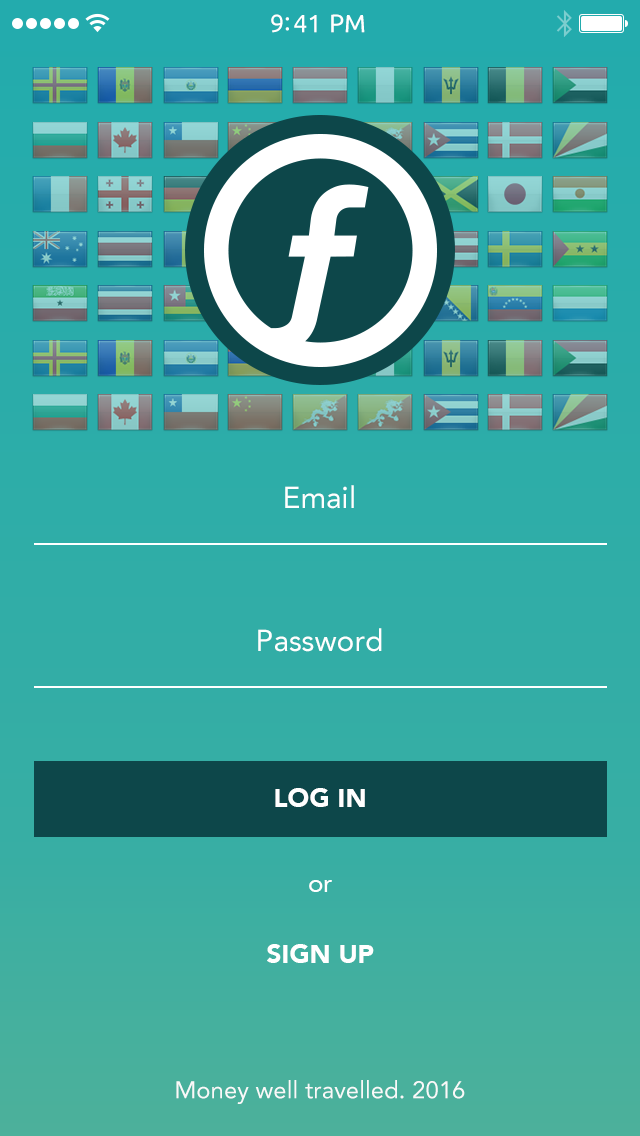
<style>
.page{position:relative;width:640px;height:1136px}
.page>*{position:absolute;margin:0}
.t1{font:25px "Ubuntu";color:#ffffff}
.t2{font:30px "Avenir-Roman";color:#ffffff}
.t3{font:26px "Avenir-Black";color:#ffffff;text-transform:uppercase}
.t4{font:26px "Avenir-Roman";color:#ffffff}
.t5{font:24px "Avenir-Roman";color:#f9f9f9}
</style>
<div class="page">
<p class="t1" style="left:271px;top:14px;width:94px;height:19px">9:41 PM</p>
<p class="t2" style="left:285px;top:485px;width:69px;height:24px">Email</p>
<p class="t2" style="left:258px;top:628px;width:124px;height:24px">Password</p>
<p class="t3" style="left:275px;top:788px;width:90px;height:19px">Log In</p>
<p class="t4" style="left:309px;top:880px;width:23px;height:12px">or</p>
<p class="t3" style="left:267px;top:944px;width:107px;height:19px">Sign Up</p>
<p class="t5" style="left:176px;top:1080px;width:289px;height:24px">Money well travelled. 2016</p>
</div>
